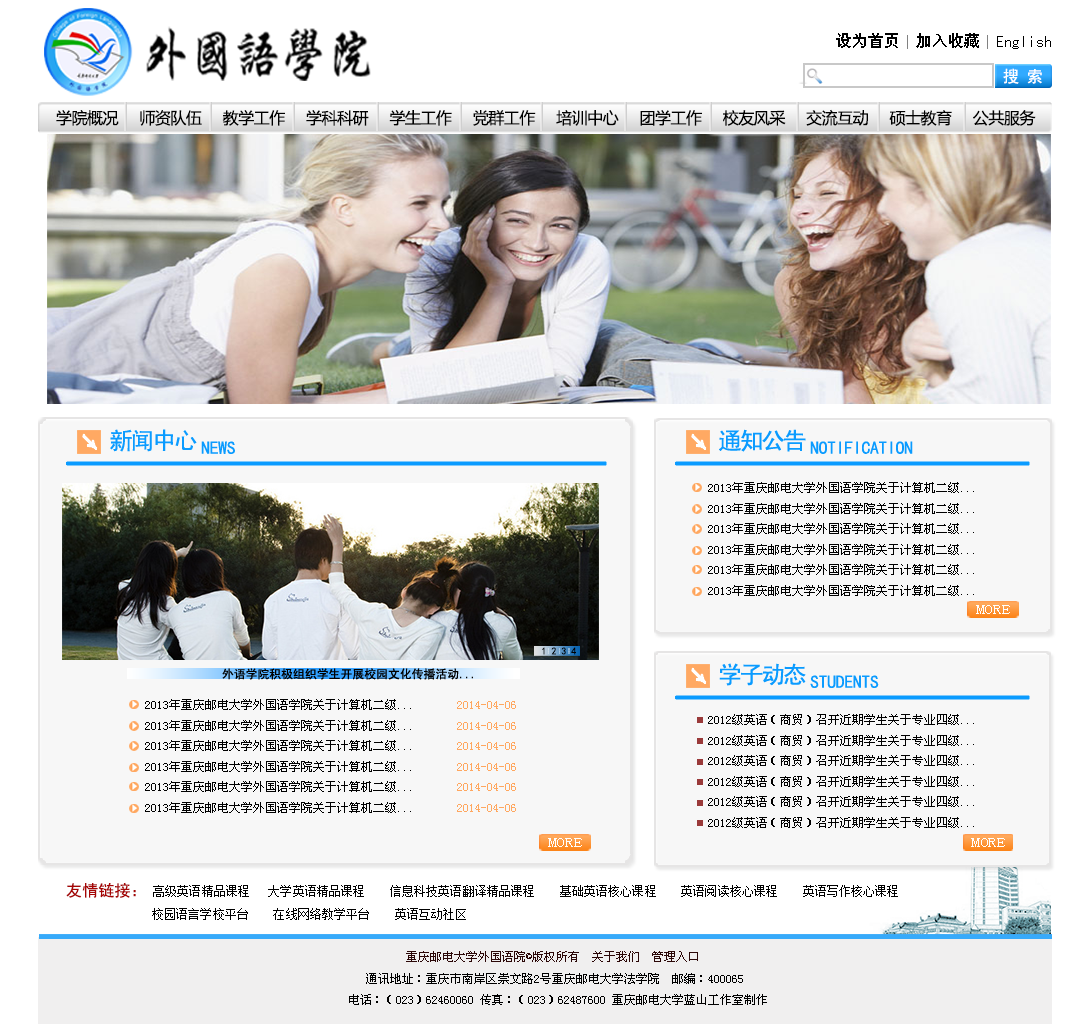
<style>
.page{position:relative;width:1092px;height:1024px;background:#f7f7f7}
.page>*{position:absolute;margin:0}
.t1{font:16px "SimHei";color:#000000}
.t2{font:16px "SimHei";color:#ffffff}
.t3{font:16px "MicrosoftYaHei";letter-spacing:-0.03em;color:#000000}
.t4{font:24px "SimHei";letter-spacing:-0.1em;color:#0a9bff}
.t5{font:18px "SimHei";letter-spacing:-0.025em;color:#0a9bff}
.t6{font:12.5px/20.5px "SimSun";color:#000000}
.t7{font:13.5px "SimSun";letter-spacing:0.025em;color:#ffffff;scale:1.24 1}
.t8{font:10.1px "SimHei";color:#000000}
.t9{font:12px "SimHei";color:#000000}
.t10{font:12.5px/20.5px "SimSun";color:#ffa75f}
.t11{font:12px/20.5px "SimSun";color:#000000}
.t12{font:16px "SimHei";letter-spacing:0.01em;color:#a60505}
.t13{font:12px "SimSun";letter-spacing:0.01em;color:#000000}
.t14{font:12px "SimSun";color:#2b0707}
.t15{font:12px "SimSun";color:#000000}
.t16{font:12px "SimSun";color:#bdb9b9}
</style>
<div class="page">
<p class="t1" style="left:836px;top:33px;width:215px;height:16px">设为首页  加入收藏  English</p>
<p class="t2" style="left:1003px;top:68px;width:39px;height:16px">搜 索</p>
<p class="t3" style="left:56px;top:109px;width:980px;height:17px">学院概况     师资队伍     教学工作     学科科研     学生工作     党群工作     培训中心     团学工作     校友风采     交流互动     硕士教育     公共服务</p>
<p class="t4" style="left:110px;top:429px;width:87px;height:23px">新闻中心</p>
<p class="t4" style="left:719px;top:429px;width:87px;height:23px">通知公告</p>
<p class="t5" style="left:201px;top:441px;width:34px;height:13px">NEWS</p>
<p class="t5" style="left:810px;top:441px;width:103px;height:13px">NOTIFICATION</p>
<p class="t6" style="left:708px;top:482px;width:266px;height:114px">2013年重庆邮电大学外国语学院关于计算机二级...<br>2013年重庆邮电大学外国语学院关于计算机二级...<br>2013年重庆邮电大学外国语学院关于计算机二级...<br>2013年重庆邮电大学外国语学院关于计算机二级...<br>2013年重庆邮电大学外国语学院关于计算机二级...<br>2013年重庆邮电大学外国语学院关于计算机二级...</p>
<p class="t7" style="left:976px;top:605px;width:34px;height:9px">MORE</p>
<p class="t8" style="left:542px;top:647px;width:34px;height:8px">1 2 3 4</p>
<p class="t4" style="left:719px;top:663px;width:87px;height:23px">学子动态</p>
<p class="t9" style="left:222px;top:668px;width:251px;height:12px">外语学院积极组织学生开展校园文化传播活动...</p>
<p class="t5" style="left:810px;top:675px;width:69px;height:13px">STUDENTS</p>
<p class="t6" style="left:145px;top:699px;width:371px;height:114px">2013年重庆邮电大学外国语学院关于计算机二级...       <span class="t10">2014-04-06<br></span>2013年重庆邮电大学外国语学院关于计算机二级...       <span class="t10">2014-04-06<br></span>2013年重庆邮电大学外国语学院关于计算机二级...       <span class="t10">2014-04-06<br></span>2013年重庆邮电大学外国语学院关于计算机二级...       <span class="t10">2014-04-06<br></span>2013年重庆邮电大学外国语学院关于计算机二级...       <span class="t10">2014-04-06<br></span>2013年重庆邮电大学外国语学院关于计算机二级...       <span class="t10">2014-04-06</span></p>
<p class="t11" style="left:708px;top:714px;width:266px;height:114px">2012级英语（商贸）召开近期学生关于专业四级...<br>2012级英语（商贸）召开近期学生关于专业四级...<br>2012级英语（商贸）召开近期学生关于专业四级...<br>2012级英语（商贸）召开近期学生关于专业四级...<br>2012级英语（商贸）召开近期学生关于专业四级...<br>2012级英语（商贸）召开近期学生关于专业四级...</p>
<p class="t7" style="left:548px;top:838px;width:34px;height:9px">MORE</p>
<p class="t7" style="left:971px;top:838px;width:34px;height:9px">MORE</p>
<p class="t12" style="left:66px;top:882px;width:70px;height:16px">友情链接：</p>
<p class="t13" style="left:153px;top:885px;width:745px;height:12px">高级英语精品课程   大学英语精品课程    信息科技英语翻译精品课程    基础英语核心课程    英语阅读核心课程    英语写作核心课程</p>
<p class="t13" style="left:152px;top:908px;width:314px;height:12px">校园语言学校平台    在线网络教学平台    英语互动社区</p>
<p class="t14" style="left:406px;top:951px;width:292px;height:11px">重庆邮电大学外国语院©版权所有  关于我们  管理入口</p>
<p class="t15" style="left:349px;top:973px;width:418px;height:32px"><span class="t16">                  <br>    </span>通讯地址：重庆市南岸区崇文路2号重庆邮电大学法学院  邮编：400065  <br> 电话：（023）62460060 传真：（023）62487600 重庆邮电大学蓝山工作室制作</p>
</div>
